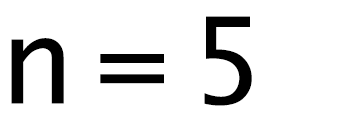
<style>
.page{position:relative;width:350px;height:128px;background:#ffffff}
.page>*{position:absolute;margin:0}
.t1{font:119.9px "LucidaSans";letter-spacing:-0.075em;color:#000000}
</style>
<div class="page">
<p class="t1" style="left:11px;top:16px;width:241px;height:90px">n = 5</p>
</div>
